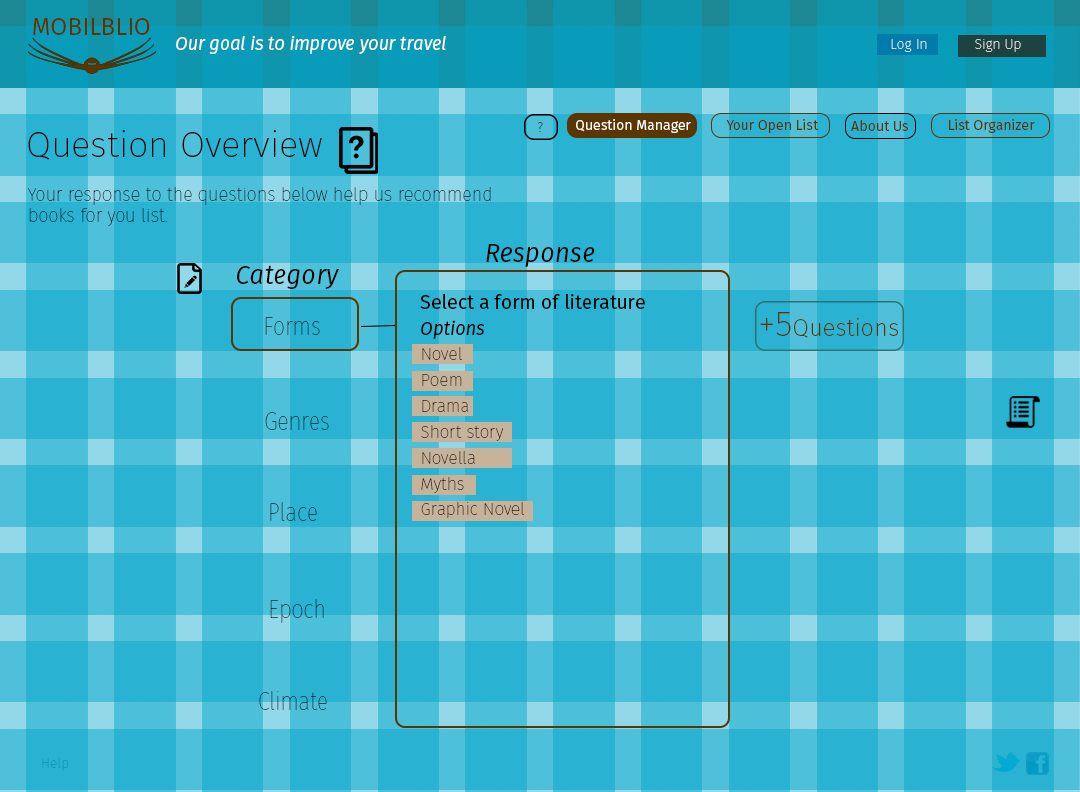
<style>
.page{position:relative;width:1080px;height:792px;background:#29b2d1}
.page>*{position:absolute;margin:0}
.t1{font:24px "FiraSans-Book";color:#5c3600}
.t2{font:18px "FiraSans-BookItalic";color:#ffffff}
.t3{font:14px "FiraSans-Hair";color:#ffffff}
.t4{font:14px "FiraSans-Hair"}
.t5{font:14px "FiraSans-Book";color:#fefefe}
.t6{font:14px "FiraSans-Book";color:#5c3600}
.t7{font:36px "FiraSans-UltraLight";color:#000000}
.t8{font:18px "FiraSans-Hair";color:#000000}
.t9{font:25.8px "FiraSans-BookItalic";color:#000000}
.t10{font:17.2px/25.8px "FiraSans-Hair";color:#000000}
.t11{font:19.4px/25.8px "FiraSans-Book";color:#000000}
.t12{font:18.3px/25.8px "FiraSans-BookItalic";color:#000000}
.t13{font:25.8px "FiraSans-Hair";scale:0.84 1}
.t14{font:38.7px "MyriadPro-Regular";scale:0.84 1}
.t15{font:24px "FiraSans-UltraLight";color:#5c3600}
.t16{font:36px "FiraSans-UltraLight";color:#5c3600}
.t17{font:25.8px "FiraSans-Hair";scale:0.83 1}
.t18{font:38.7px "MyriadPro-Regular";scale:0.83 1}
</style>
<div class="page">
<p class="t1" style="left:33px;top:18px;width:117px;height:17px">MOBILBLIO</p>
<p class="t2" style="left:176px;top:36px;width:270px;height:18px">Our goal is to improve your travel</p>
<p class="t3" style="left:891px;top:39px;width:36px;height:13px">Log In</p>
<p class="t4" style="left:975px;top:39px;width:46px;height:13px">Sign Up</p>
<p class="t4" style="left:537px;top:122px;width:6px;height:10px">?</p>
<p class="t5" style="left:576px;top:119px;width:115px;height:14px">Question Manager</p>
<p class="t6" style="left:726px;top:119px;width:93px;height:14px">Your Open List</p>
<p class="t6" style="left:851px;top:120px;width:57px;height:11px">About Us</p>
<p class="t6" style="left:949px;top:119px;width:86px;height:14px">List Organizer</p>
<p class="t7" style="left:28px;top:130px;width:294px;height:30px">Question Overview</p>
<p class="t8" style="left:28px;top:187px;width:463px;height:39px">Your response to the questions below help us recommend <br>books for you list.</p>
<p class="t9" style="left:486px;top:244px;width:109px;height:23px">Response</p>
<p class="t9" style="left:237px;top:265px;width:102px;height:24px">Category</p>
<p class="t10" style="left:420px;top:294px;width:225px;height:224px"><span class="t11">Select a form of literature<br></span><span class="t12">Options<br></span>Novel<br>Poem<br>Drama<br>Short story<br>Novella<br>Myths<br>Graphic Novel</p>
<p class="t13" style="left:265px;top:317px;width:55px;height:18px"><span class="t14"><br></span>Forms</p>
<p class="t15" style="left:760px;top:312px;width:138px;height:26px"><span class="t16">+5</span>Questions</p>
<p class="t17" style="left:265px;top:412px;width:64px;height:18px"><span class="t18"><br></span>Genres</p>
<p class="t17" style="left:270px;top:502px;width:47px;height:19px"><span class="t18"><br></span>Place</p>
<p class="t17" style="left:270px;top:599px;width:54px;height:24px"><span class="t18"><br></span>Epoch</p>
<p class="t17" style="left:259px;top:691px;width:68px;height:19px"><span class="t18"><br></span>Climate</p>
<p class="t4" style="left:42px;top:757px;width:27px;height:14px">Help</p>
</div>
